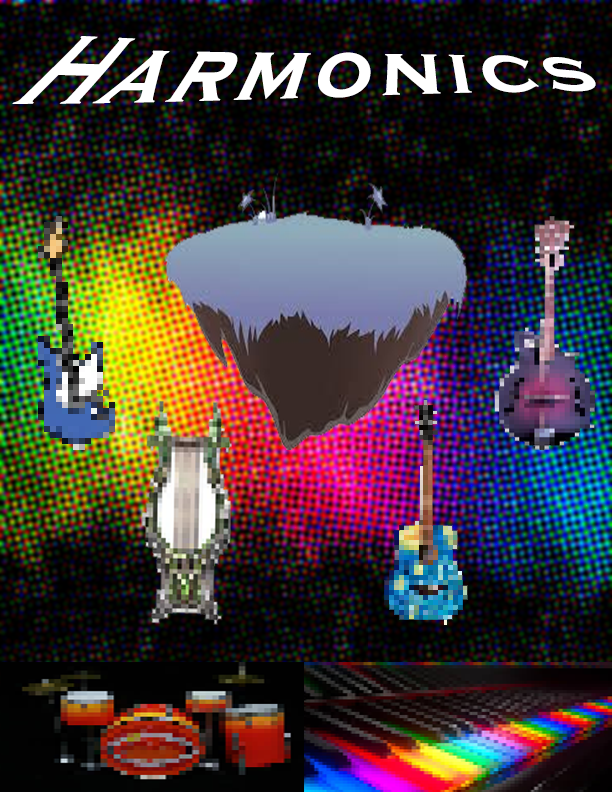
<style>
.page{position:relative;width:612px;height:792px}
.page>*{position:absolute;margin:0}
.t1{font:80px "CopperplateGothic-Bold";letter-spacing:0.1em;color:#ffffff;font-style:italic}
</style>
<div class="page">
<p class="t1" style="left:12px;top:36px;width:584px;height:68px">Harmonics</p>
</div>
